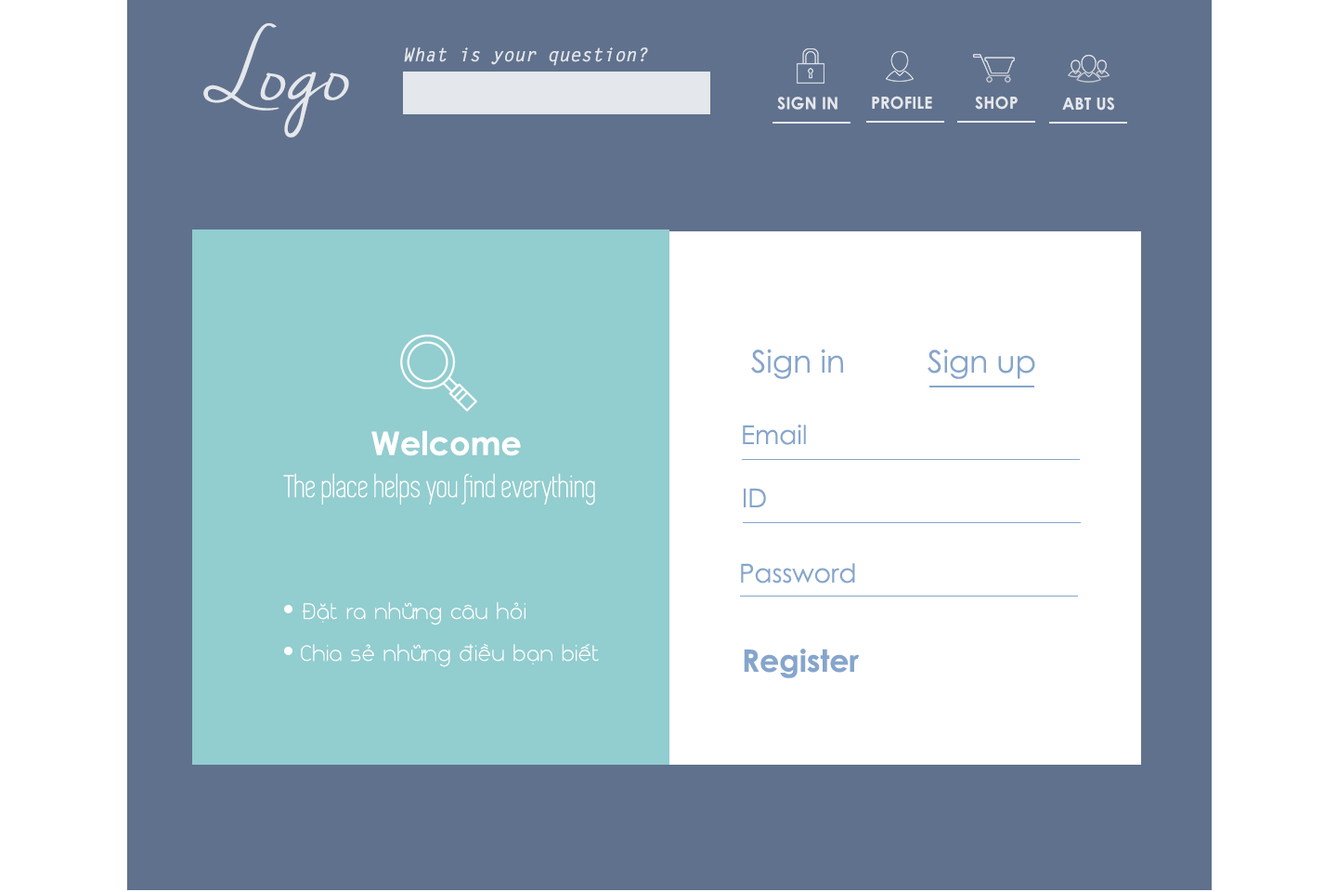
<style>
.page{position:relative;width:1337px;height:892px;background:#ffffff}
.page>*{position:absolute;margin:0}
.t1{font:88.7px "NellaSueDemo";color:#e4e7ec}
.t2{font:18.6px "LetterGothicStd-BoldSlanted";color:#e4e7ec}
.t3{font:16.7px "CenturyGothic-Bold";color:#e4e7ec}
.t4{font:30.6px "CenturyGothic";color:#85a5cc}
.t5{font:26px "CenturyGothic";color:#85a5cc}
.t6{font:32.5px "CenturyGothic-Bold";color:#ffffff}
.t7{font:32.5px "iCielSimplifica";color:#ffffff}
.t8{font:22.3px "FS-Nokio-Light";color:#ffffff}
.t9{font:30.6px "CenturyGothic-Bold";color:#85a5cc}
</style>
<div class="page">
<p class="t1" style="left:203px;top:23px;width:146px;height:114px">Logo</p>
<p class="t2" style="left:404px;top:47px;width:244px;height:19px">What is your question?</p>
<p class="t3" style="left:777px;top:97px;width:61px;height:13px">SIGN IN</p>
<p class="t3" style="left:872px;top:96px;width:60px;height:14px">PROFILE</p>
<p class="t3" style="left:975px;top:96px;width:43px;height:14px">SHOP</p>
<p class="t3" style="left:1062px;top:97px;width:53px;height:14px">ABT US</p>
<p class="t4" style="left:751px;top:349px;width:92px;height:30px">Sign in</p>
<p class="t4" style="left:928px;top:349px;width:108px;height:30px">Sign up</p>
<p class="t5" style="left:743px;top:424px;width:63px;height:21px">Email</p>
<p class="t6" style="left:372px;top:430px;width:149px;height:26px">Welcome</p>
<p class="t7" style="left:283px;top:473px;width:312px;height:32px">The place helps you find everything</p>
<p class="t5" style="left:744px;top:488px;width:22px;height:19px">ID</p>
<p class="t5" style="left:741px;top:563px;width:114px;height:20px">Password</p>
<p class="t8" style="left:302px;top:602px;width:224px;height:23px">Đặt ra những câu hỏi</p>
<p class="t8" style="left:301px;top:644px;width:298px;height:23px">Chia sẻ những điều bạn biết</p>
<p class="t9" style="left:744px;top:648px;width:116px;height:30px">Register</p>
</div>
